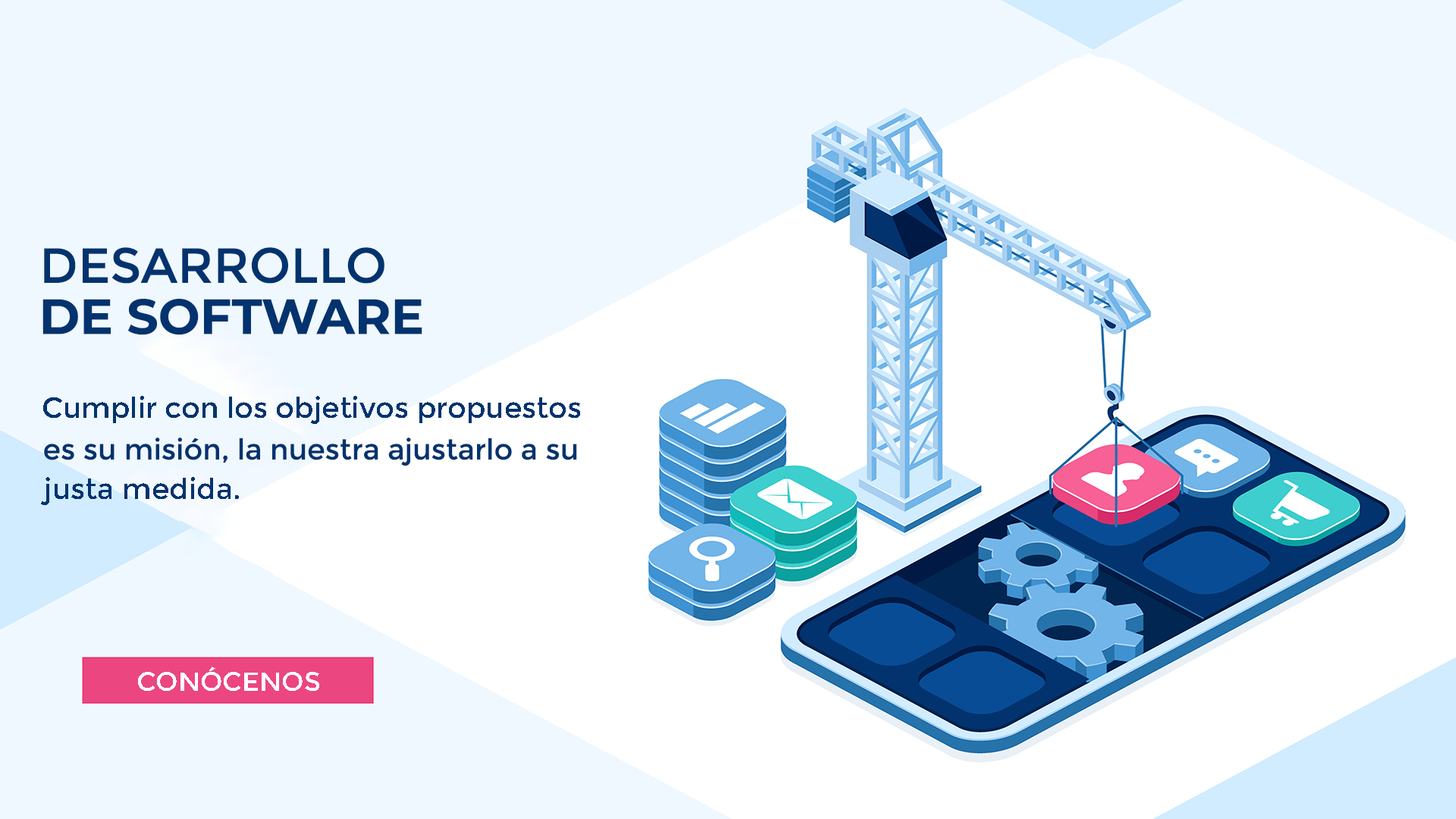
<style>
.page{position:relative;width:1456px;height:819px;background:#eff8ff}
.page>*{position:absolute;margin:0}
.t1{font:49.3px "Montserrat-Regular";color:#02336e}
.t2{font:49.3px "Montserrat-Bold";color:#02336e}
.t3{font:28.8px "Montserrat-Regular";color:#02336e}
.t4{font:26.5px "Montserrat-Regular";color:#ffffff}
</style>
<div class="page">
<p class="t1" style="left:44px;top:247px;width:340px;height:37px">DESARROLLO</p>
<p class="t2" style="left:42px;top:299px;width:380px;height:36px">DE SOFTWARE</p>
<p class="t3" style="left:43px;top:396px;width:537px;height:28px">Cumplir con los objetivos propuestos</p>
<p class="t3" style="left:44px;top:438px;width:533px;height:28px">es su misión, la nuestra ajustarlo a su</p>
<p class="t3" style="left:41px;top:477px;width:198px;height:28px">justa medida.</p>
<p class="t4" style="left:138px;top:667px;width:181px;height:24px">CONÓCENOS</p>
</div>
